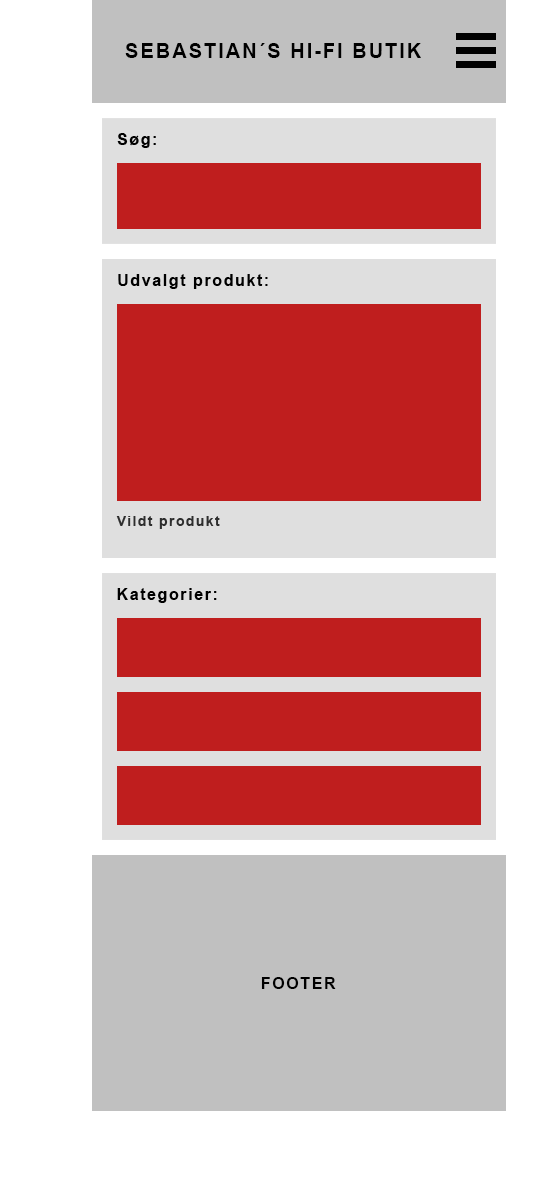
<style>
.page{position:relative;width:552px;height:1180px;background:#ffffff}
.page>*{position:absolute;margin:0}
.t1{font:20px "Arial-BoldMT";letter-spacing:0.1em;color:#000000}
.t2{font:16px "Arial-BoldMT";letter-spacing:0.1em;color:#000000}
.t3{font:14px "Arial-BoldMT";letter-spacing:0.1em;color:#2e2e2e}
</style>
<div class="page">
<p class="t1" style="left:125px;top:43px;width:296px;height:15px">SEBASTIAN´S HI-FI BUTIK</p>
<p class="t2" style="left:117px;top:133px;width:39px;height:15px">Søg:</p>
<p class="t2" style="left:118px;top:274px;width:150px;height:15px">Udvalgt produkt:</p>
<p class="t3" style="left:116px;top:516px;width:104px;height:13px">Vildt produkt</p>
<p class="t2" style="left:117px;top:588px;width:100px;height:15px">Kategorier:</p>
<p class="t2" style="left:261px;top:977px;width:75px;height:12px">FOOTER</p>
</div>
